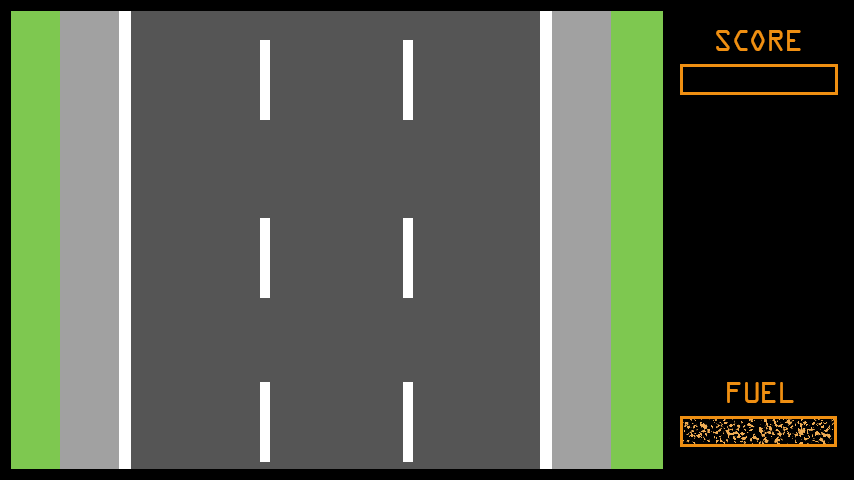
<style>
.page{position:relative;width:854px;height:480px;background:#555555}
.page>*{position:absolute;margin:0}
.t1{font:32.1px "OCRAExtended";letter-spacing:-0.055em;color:#ef8f12}
</style>
<div class="page">
<p class="t1" style="left:716px;top:30px;width:85px;height:21px">SCORE</p>
<p class="t1" style="left:727px;top:382px;width:67px;height:21px">FUEL</p>
</div>
